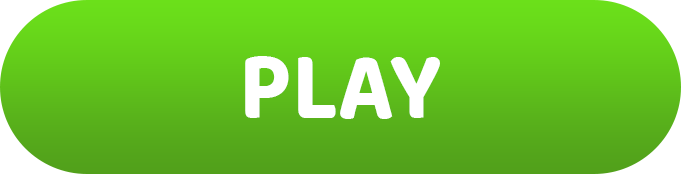
<style>
.page{position:relative;width:681px;height:174px}
.page>*{position:absolute;margin:0}
.t1{font:98.5px "BalooThambi2-Bold";color:#ffffff;scale:0.91 1}
</style>
<div class="page">
<p class="t1" style="left:245px;top:56px;width:195px;height:63px">PLAY</p>
</div>
